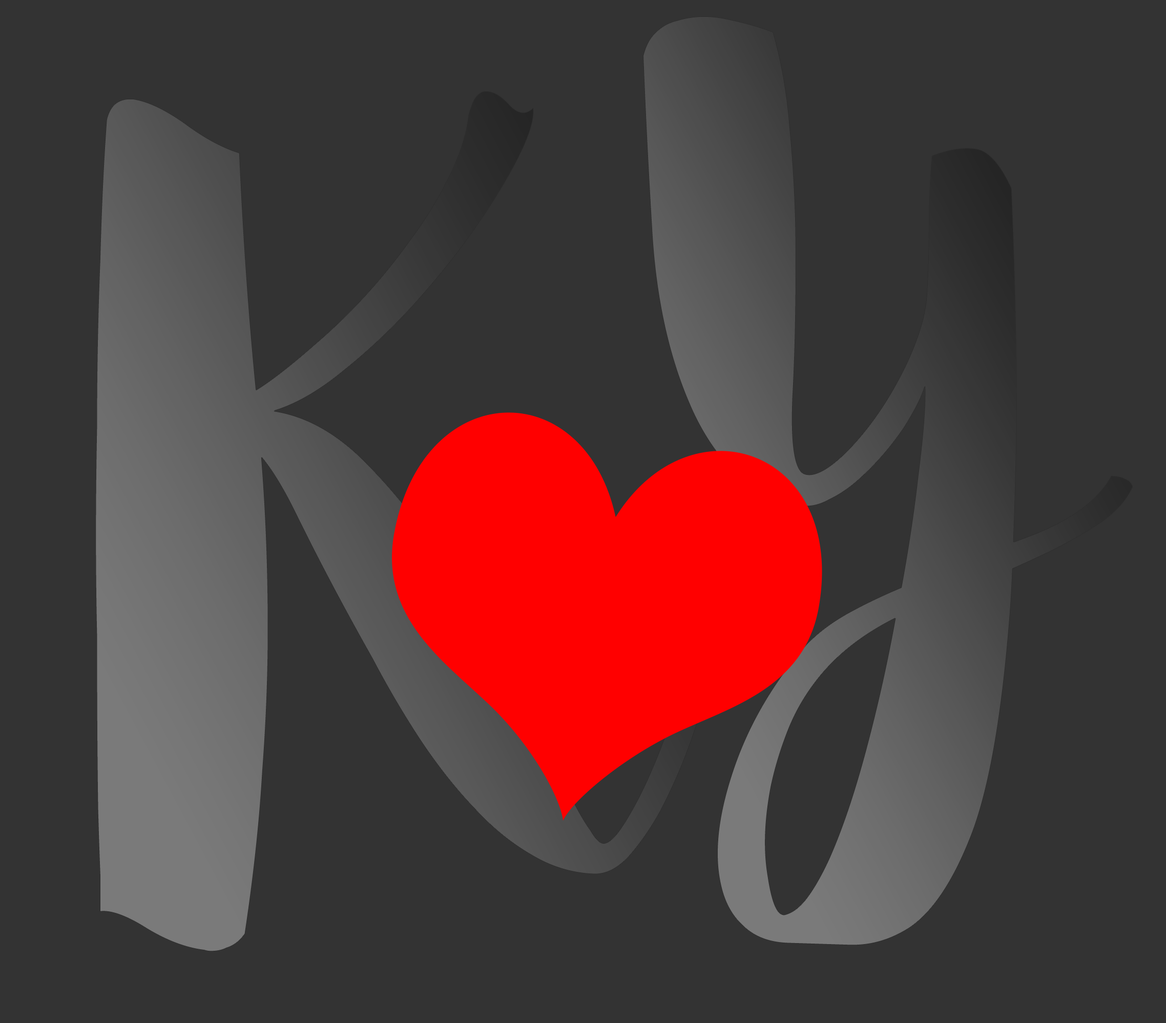
<style>
.page{position:relative;width:1166px;height:1023px;background:#333333}
.page>*{position:absolute;margin:0}
.t1{font:1011.7px "Sophia";letter-spacing:-0.01em}
.t2{font:1129.1px "Sophia";letter-spacing:-0.01em}
</style>
<div class="page">
<p class="t1" style="left:643px;top:16px;width:490px;height:930px">Y</p>
<p class="t2" style="left:95px;top:91px;width:617px;height:861px">K</p>
</div>
